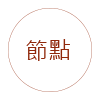
<style>
.page{position:relative;width:100px;height:100px;background:#ffffff}
.page>*{position:absolute;margin:0}
.t1{font:23.3px "MicrosoftJhengHeiRegular";color:#90280b}
</style>
<div class="page">
<p class="t1" style="left:26px;top:39px;width:44px;height:22px">節點</p>
</div>
